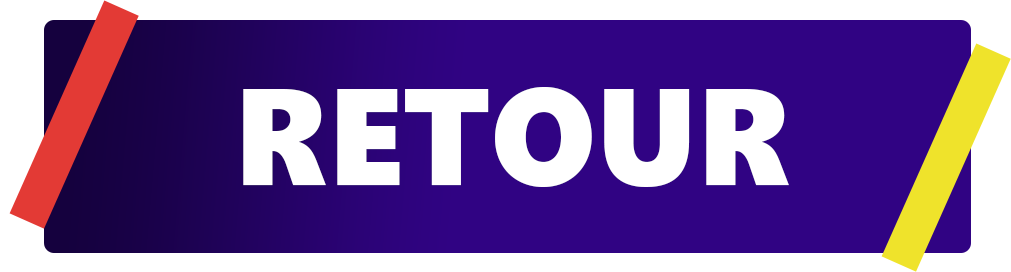
<style>
.page{position:relative;width:1011px;height:272px;background:#300383}
.page>*{position:absolute;margin:0}
.t1{font:137.3px "SegoeUIBlack";color:#ffffff;text-transform:uppercase}
</style>
<div class="page">
<p class="t1" style="left:243px;top:87px;width:546px;height:100px">RETOUR</p>
</div>
